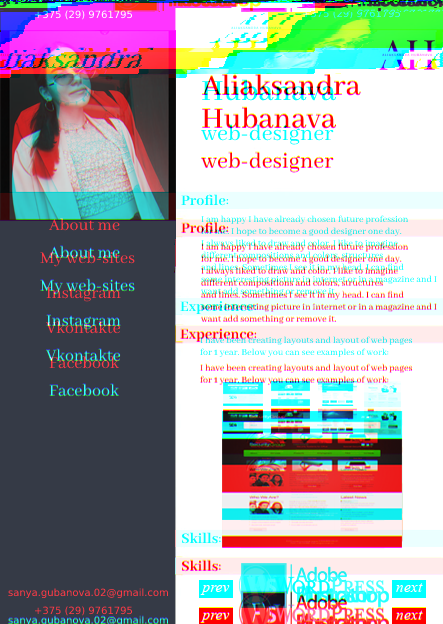
<style>
.page{position:relative;width:443px;height:624px;background:#ffffff}
.page>*{position:absolute;margin:0}
.t1{font:32px "AbhayaLibre-Medium"}
.t2{font:24px "AbhayaLibre-Regular"}
.t3{font:16px "AbhayaLibre-Bold"}
.t4{font:16px "AbhayaLibre-Regular"}
.t5{font:18px "AbhayaLibre-Regular"}
.t6{font:10px "AbhayaLibre-Regular"}
</style>
<div class="page">
<p class="t1" style="left:202px;top:77px;width:134px;height:22px">Hubanava</p>
<p class="t2" style="left:201px;top:122px;width:133px;height:21px">web-designer</p>
<p class="t3" style="left:181px;top:192px;width:48px;height:12px">Profile<span class="t4">:</span></p>
<p class="t5" style="left:49px;top:216px;width:71px;height:13px">About me</p>
<p class="t6" style="left:201px;top:213px;width:236px;height:81px">I am happy I have already chosen future profession <br>for me. I hope to become a good designer one day. <br>I always liked to draw and color. I like to imagine <br>different compositions and colors, structures<br>and lines. Sometimes I see it in my head. I can find<br>some interesting picture in internet or in a magazine and I <br>want add something or remove it.</p>
<p class="t5" style="left:40px;top:249px;width:95px;height:16px">My web-sites</p>
<p class="t5" style="left:46px;top:285px;width:75px;height:15px">Instagram</p>
<p class="t3" style="left:180px;top:299px;width:77px;height:13px">Experience<span class="t4">:</span></p>
<p class="t5" style="left:45px;top:319px;width:76px;height:13px">Vkontakte</p>
<p class="t5" style="left:49px;top:354px;width:71px;height:13px">Facebook</p>
<p class="t3" style="left:181px;top:530px;width:40px;height:12px">Skills<span class="t4">:</span></p>
</div>
